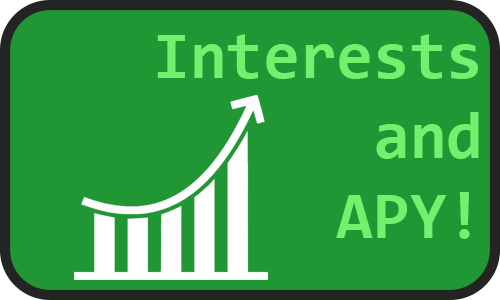
<style>
.page{position:relative;width:500px;height:300px;background:#209734}
.page>*{position:absolute;margin:0}
.t1{font:66.7px "Consolas-Bold";color:#71f16e}
</style>
<div class="page">
<p class="t1" style="left:157px;top:34px;width:322px;height:205px;text-align:right">Interests<br>and<br>APY!</p>
</div>
